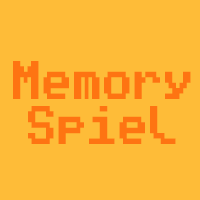
<style>
.page{position:relative;width:200px;height:200px;background:#febc38}
.page>*{position:absolute;margin:0}
.t1{font:43.5px/45px "PublicPixel";letter-spacing:0.05em;color:#fe7412;scale:0.67 1}
</style>
<div class="page">
<p class="t1" style="left:13px;top:61px;width:178px;height:83px;text-align:center">Memory<br>Spiel</p>
</div>
